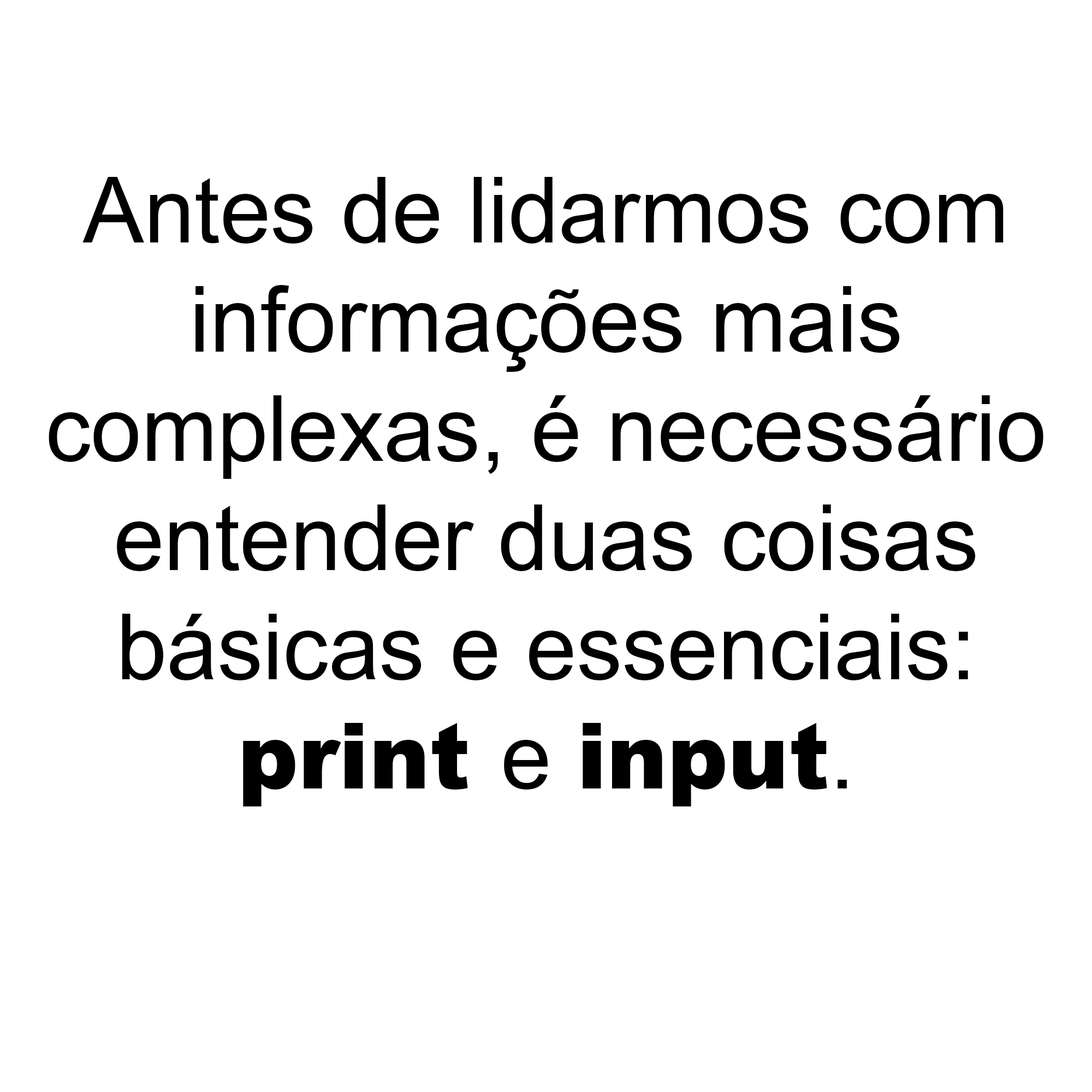
<style>
.page{position:relative;width:1092px;height:1092px;background:#ffffff}
.page>*{position:absolute;margin:0}
.t1{font:91px "ArialMT";color:#000000}
.t2{font:91px "Arial-Black";color:#000000}
</style>
<div class="page">
<p class="t1" style="left:49px;top:177px;width:994px;height:629px;text-align:center">Antes de lidarmos com<br>informações mais<br>complexas, é necessário<br>entender duas coisas<br>básicas e essenciais:<br><span class="t2">print </span>e <span class="t2">input</span>.</p>
</div>
